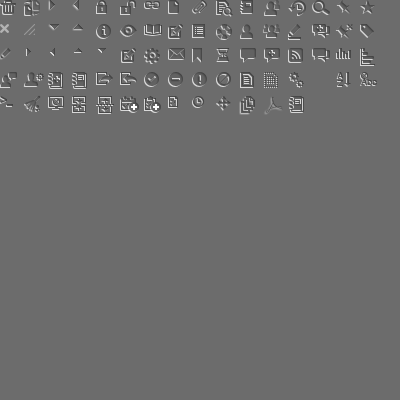
<style>
.page{position:relative;width:400px;height:400px;background:#6c6c6c}
.page>*{position:absolute;margin:0}
.t1{font:9px "HelveticaNeue";color:#4e4e4e}
</style>
<div class="page">
<p class="t1" style="left:361px;top:79px;width:16px;height:6px">Abc</p>
</div>
